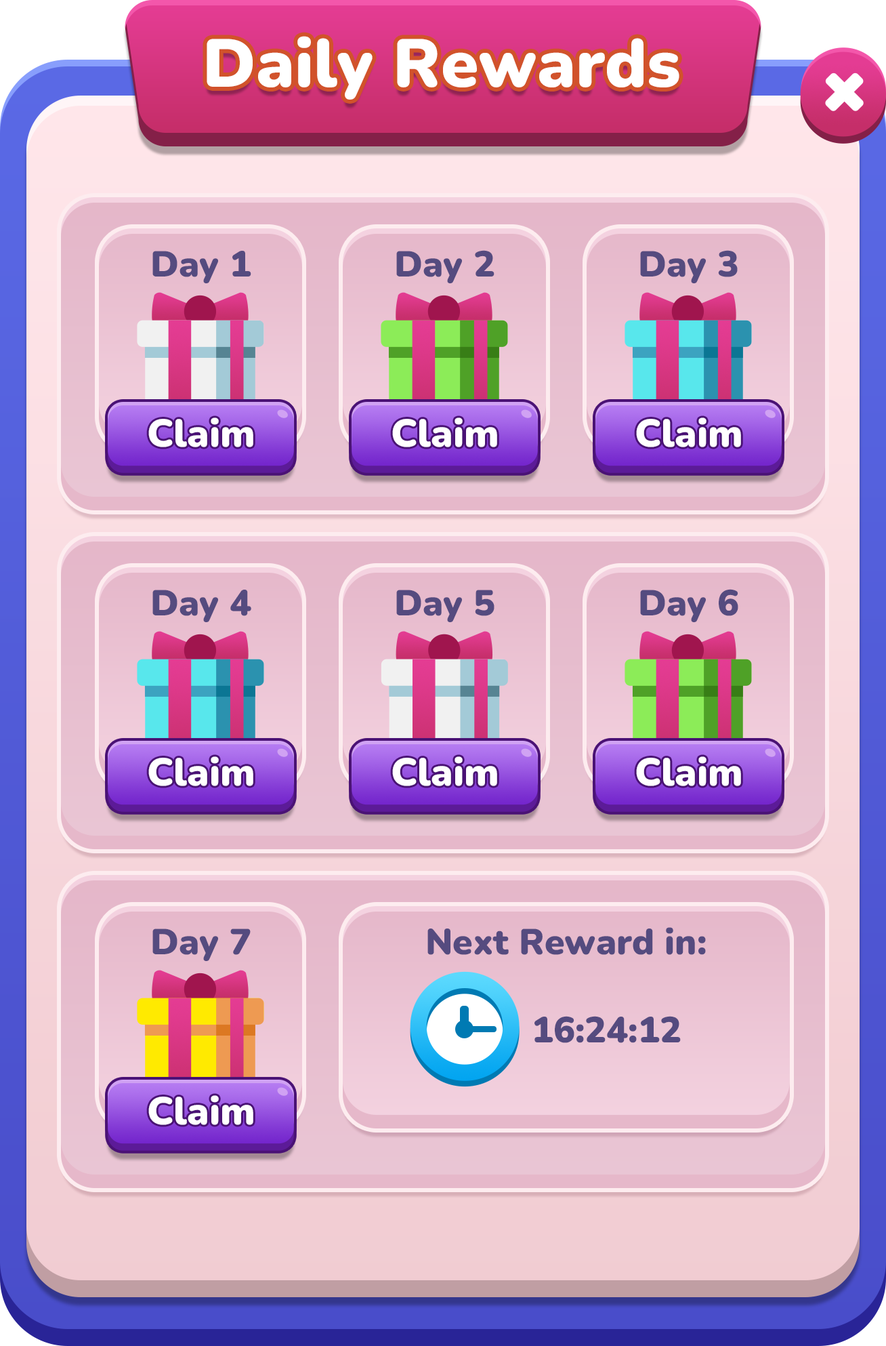
<style>
.page{position:relative;width:886px;height:1346px}
.page>*{position:absolute;margin:0}
.t1{font:67.8px "Nunito-Black";color:#ffffff}
.t2{font:36.1px "Nunito-Black";color:#554b7f}
.t3{font:38.8px "Nunito-Black";color:#ffffff}
</style>
<div class="page">
<p class="t1" style="left:207px;top:36px;width:473px;height:64px">Daily Rewards</p>
<p class="t2" style="left:152px;top:251px;width:99px;height:32px">Day 1</p>
<p class="t2" style="left:396px;top:250px;width:99px;height:33px">Day 2</p>
<p class="t2" style="left:640px;top:250px;width:98px;height:33px">Day 3</p>
<p class="t3" style="left:148px;top:417px;width:105px;height:30px">Claim</p>
<p class="t3" style="left:392px;top:417px;width:105px;height:30px">Claim</p>
<p class="t3" style="left:636px;top:417px;width:105px;height:30px">Claim</p>
<p class="t2" style="left:152px;top:589px;width:99px;height:33px">Day 4</p>
<p class="t2" style="left:396px;top:589px;width:99px;height:33px">Day 5</p>
<p class="t2" style="left:640px;top:589px;width:98px;height:33px">Day 6</p>
<p class="t3" style="left:148px;top:756px;width:105px;height:30px">Claim</p>
<p class="t3" style="left:392px;top:756px;width:105px;height:30px">Claim</p>
<p class="t3" style="left:636px;top:756px;width:105px;height:30px">Claim</p>
<p class="t2" style="left:152px;top:928px;width:99px;height:33px">Day 7</p>
<p class="t2" style="left:428px;top:927px;width:278px;height:28px">Next Reward in:</p>
<p class="t2" style="left:535px;top:1016px;width:146px;height:27px">16:24:12</p>
<p class="t3" style="left:148px;top:1095px;width:105px;height:30px">Claim</p>
</div>
